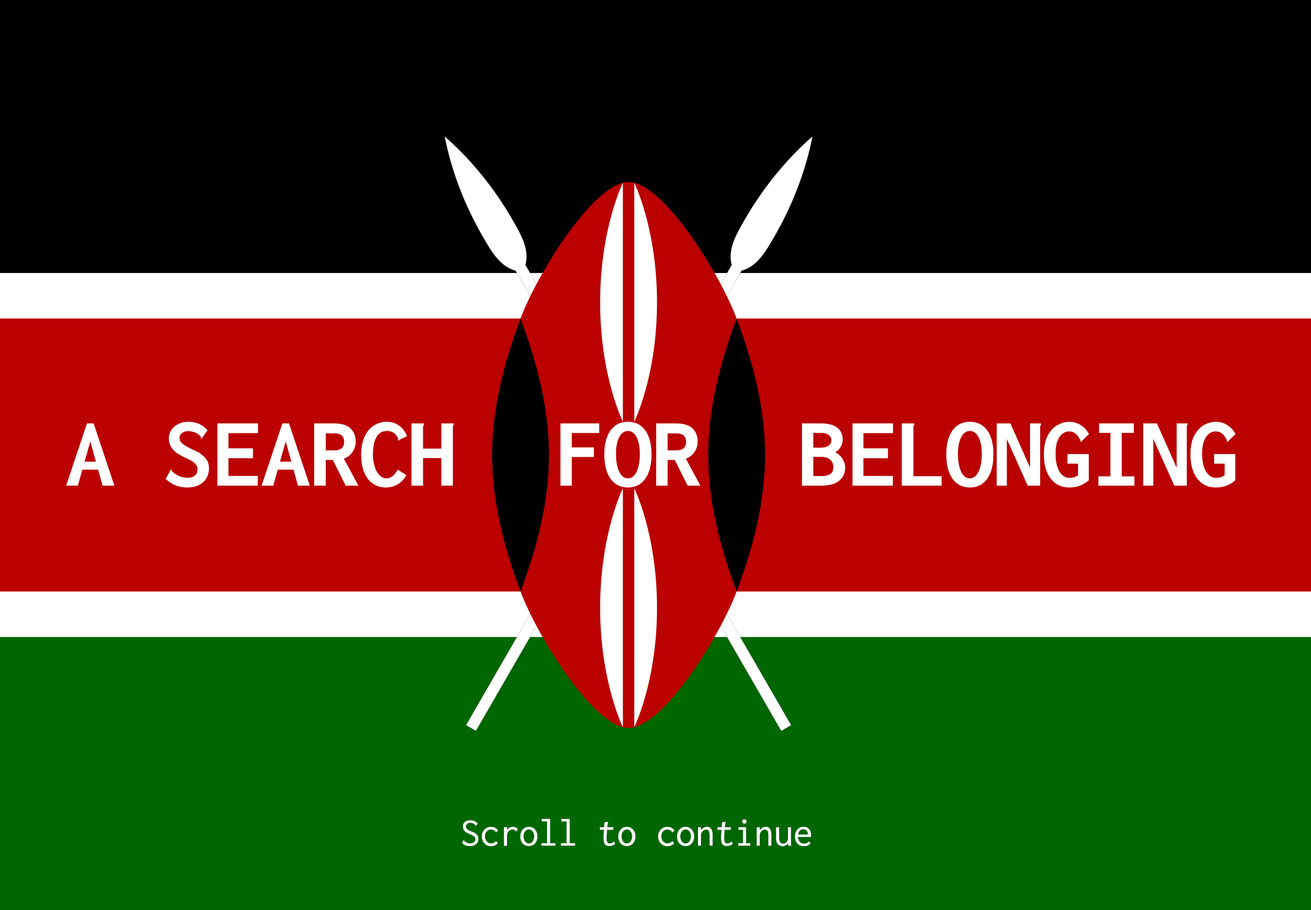
<style>
.page{position:relative;width:1311px;height:910px;background:#000000}
.page>*{position:absolute;margin:0}
.t1{font:99.7px "Inconsolata-Bold";letter-spacing:-0.01em;color:#ffffff}
.t2{font:40px "Inconsolata-Regular";letter-spacing:-0.01em;color:#ffffff}
</style>
<div class="page">
<p class="t1" style="left:66px;top:422px;width:1169px;height:66px">A SEARCH  FOR  BELONGING</p>
<p class="t2" style="left:462px;top:819px;width:349px;height:27px">Scroll to continue</p>
</div>
